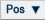
<style>
.page{position:relative;width:45px;height:20px;background:#edf1f4}
.page>*{position:absolute;margin:0}
.t1{font:12px "ArialNarrow";color:#103852;font-weight:bold;scale:1.05 1}
</style>
<div class="page">
<p class="t1" style="left:6px;top:4px;width:19px;height:10px">Pos</p>
</div>
